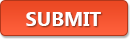
<style>
.page{position:relative;width:130px;height:39px}
.page>*{position:absolute;margin:0}
.t1{font:20px "SegoeUI-Bold";color:#ffffff}
</style>
<div class="page">
<p class="t1" style="left:26px;top:12px;width:75px;height:14px">SUBMIT</p>
</div>
